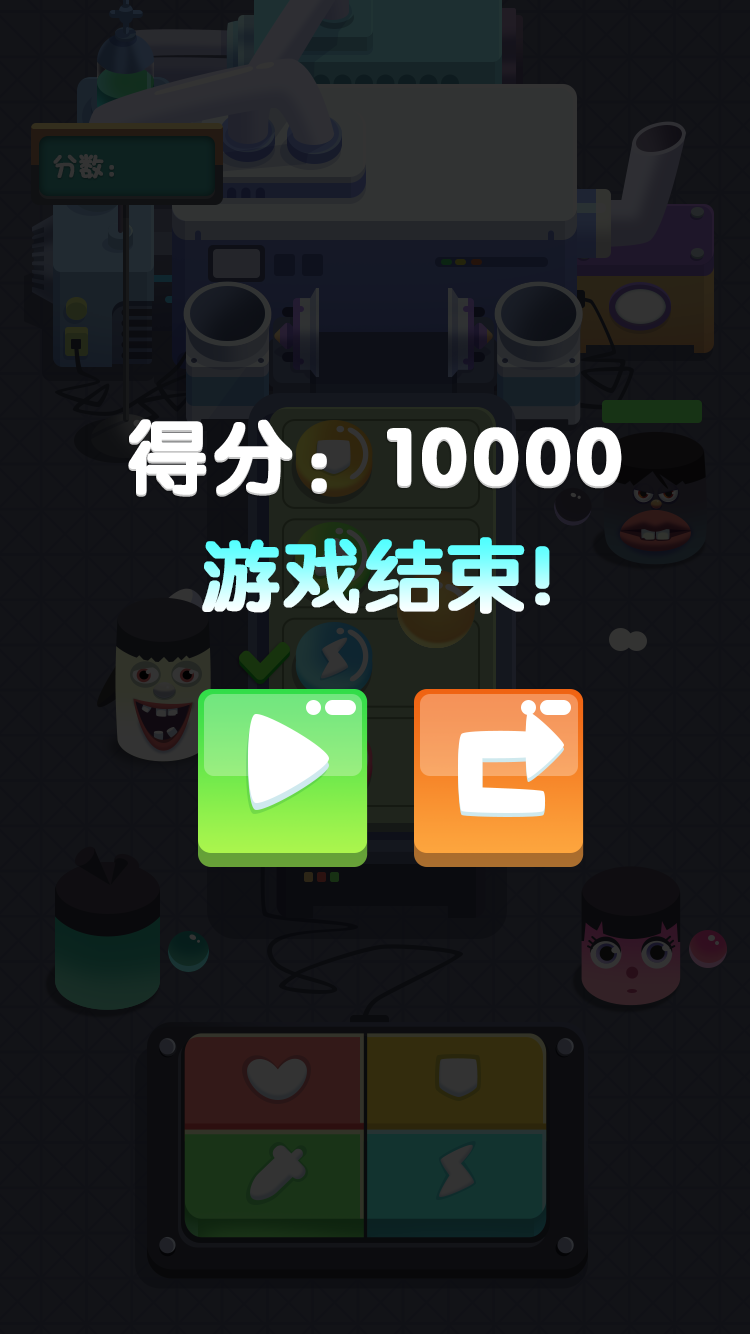
<style>
.page{position:relative;width:750px;height:1334px;background:#121317}
.page>*{position:absolute;margin:0}
.t1{font:80px "FZY4K--GBK1-0";letter-spacing:0.05em;color:#ffffff;font-weight:bold}
.t2{font:80px "FZY4K--GBK1-0";font-weight:bold}
</style>
<div class="page">
<p class="t1" style="left:128px;top:421px;width:494px;height:76px">得分：10000</p>
<p class="t1" style="left:128px;top:419px;width:494px;height:76px">得分：10000</p>
<p class="t2" style="left:202px;top:537px;width:348px;height:77px">游戏结束!</p>
</div>
